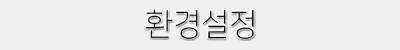
<style>
.page{position:relative;width:400px;height:50px;background:#f0f0f0}
.page>*{position:absolute;margin:0}
.t1{font:31px "NanumSquareL";color:#000000}
</style>
<div class="page">
<p class="t1" style="left:145px;top:9px;width:109px;height:30px">환경설정</p>
</div>
